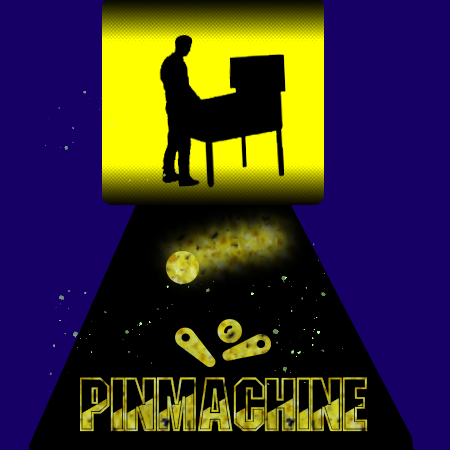
<style>
.page{position:relative;width:450px;height:450px;background:#160066}
.page>*{position:absolute;margin:0}
.t1{font:72px "Gunmetal"}
</style>
<div class="page">
<p class="t1" style="left:80px;top:377px;width:288px;height:55px">pinmachine</p>
</div>
